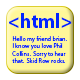
<style>
.page{position:relative;width:80px;height:80px;background:#fff799}
.page>*{position:absolute;margin:0}
.t1{font:20.1px "MyriadPro-Bold";color:#0224ff}
.t2{font:6.2px "MyriadPro-Regular";color:#0224ff}
</style>
<div class="page">
<p class="t1" style="left:9px;top:13px;width:63px;height:15px">&lt;html&gt;</p>
<p class="t2" style="left:12px;top:36px;width:55px;height:27px">Hello my friend brian.  <br>I know you love Phil Collins.  Sorry to hear that.  Skid Row rocks.</p>
</div>
